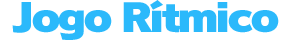
<style>
.page{position:relative;width:290px;height:40px;background:#ffffff}
.page>*{position:absolute;margin:0}
.t1{font:38px "RodinPro-UB";letter-spacing:-0.085em;color:#2bb9fb;scale:1.16 1}
</style>
<div class="page">
<p class="t1" style="left:12px;top:0px;width:267px;height:40px">Jogo Rítmico</p>
</div>
